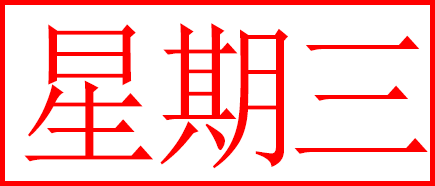
<style>
.page{position:relative;width:435px;height:186px;background:#ffffff}
.page>*{position:absolute;margin:0}
.t1{font:159.8px "SimSun";letter-spacing:-0.05em;color:#ff0000;scale:0.9 1}
</style>
<div class="page">
<p class="t1" style="left:24px;top:23px;width:404px;height:146px">星期三</p>
</div>
